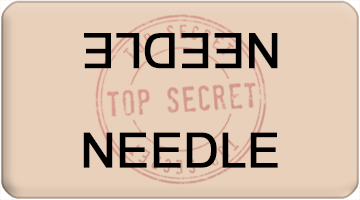
<style>
.page{position:relative;width:360px;height:200px;background:#e8d0bb}
.page>*{position:absolute;margin:0}
.t1{font:48px "ArialMT";color:#000000;font-weight:bold}
</style>
<div class="page">
<p class="t1" style="left:84px;top:33px;width:194px;height:36px;rotate:180deg">NEEDLE</p>
<p class="t1" style="left:83px;top:132px;width:195px;height:36px">NEEDLE</p>
</div>
